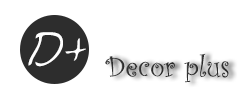
<style>
.page{position:relative;width:250px;height:100px;background:#ffffff}
.page>*{position:absolute;margin:0}
.t1{font:40px "Avantque...";color:#ffffff}
.t2{font:30px "CurlzMT";color:#2d2d2d}
</style>
<div class="page">
<p class="t1" style="left:28px;top:32px;width:58px;height:35px">D+</p>
<p class="t2" style="left:105px;top:53px;width:124px;height:30px">Decor plus</p>
</div>
